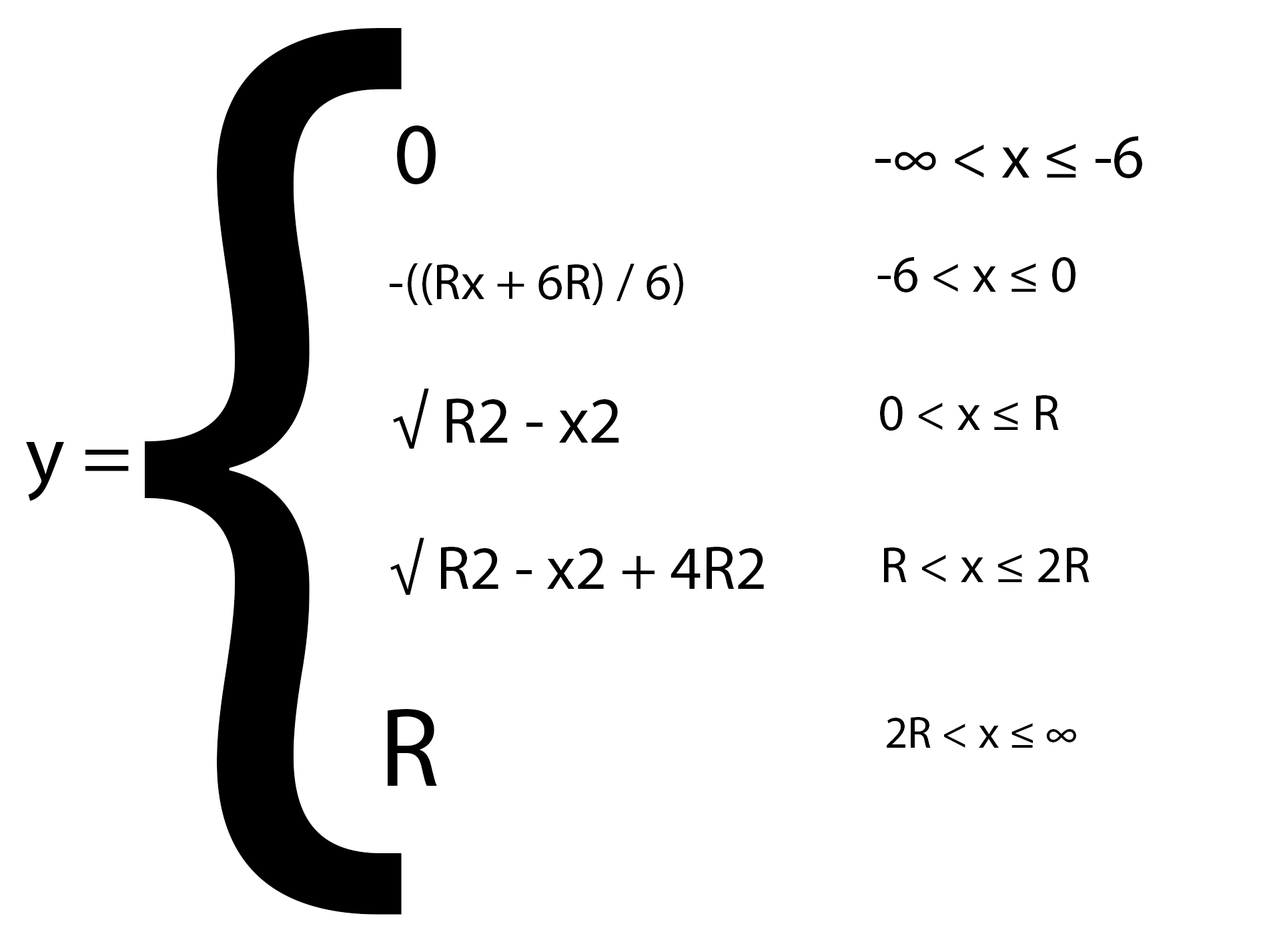
<style>
.page{position:relative;width:1261px;height:946px;background:#ffffff}
.page>*{position:absolute;margin:0}
.t1{font:1112.1px "MyriadPro-Regular";color:#000000}
.t2{font:88.6px "MyriadPro-Regular";color:#000000}
.t3{font:62.1px "MyriadPro-Regular";color:#000000}
.t4{font:52.4px "MyriadPro-Regular";color:#000000}
.t5{font:51.4px "MyriadPro-Regular";color:#000000}
.t6{font:65.5px "MyriadPro-Regular";color:#000000}
.t7{font:51.1px "MyriadPro-Regular";color:#000000}
.t8{font:83.4px "MyriadPro-Regular";color:#000000}
.t9{font:61.9px "MyriadPro-Regular";color:#000000}
.t10{font:51.3px "MyriadPro-Regular";color:#000000}
.t11{font:112.4px "MyriadPro-Regular";color:#000000}
.t12{font:45.2px "MyriadPro-Regular";color:#000000}
</style>
<div class="page">
<p class="t1" style="left:145px;top:28px;width:257px;height:886px">{</p>
<p class="t2" style="left:397px;top:125px;width:39px;height:60px">0</p>
<p class="t3" style="left:875px;top:136px;width:267px;height:42px">-∞ &lt; x ≤ -6</p>
<p class="t4" style="left:877px;top:257px;width:199px;height:35px">-6 &lt; x ≤ 0</p>
<p class="t5" style="left:390px;top:263px;width:293px;height:42px">-((Rx + 6R) / 6)</p>
<p class="t6" style="left:393px;top:388px;width:226px;height:60px">√ R2 - x2</p>
<p class="t7" style="left:880px;top:395px;width:179px;height:35px">0 &lt; x ≤ R</p>
<p class="t8" style="left:26px;top:442px;width:103px;height:59px">y =</p>
<p class="t9" style="left:390px;top:537px;width:374px;height:58px">√ R2 - x2 + 4R2</p>
<p class="t10" style="left:884px;top:547px;width:206px;height:35px">R &lt; x ≤ 2R</p>
<p class="t11" style="left:388px;top:709px;width:49px;height:76px">R</p>
<p class="t12" style="left:887px;top:717px;width:189px;height:30px">2R &lt; x ≤ ∞</p>
</div>
